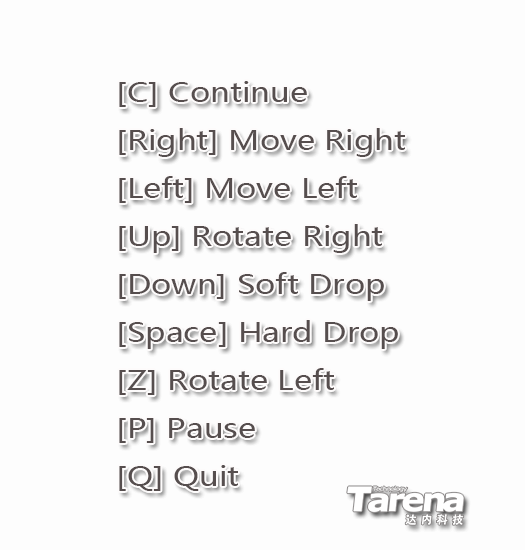
<style>
.page{position:relative;width:525px;height:550px;background:#fdfdfd}
.page>*{position:absolute;margin:0}
.t1{font:27.4px "MicrosoftYaHei";color:#564e4e;scale:1.17 1}
</style>
<div class="page">
<p class="t1" style="left:119px;top:81px;width:286px;height:410px">[C] Continue<br>[Right] Move Right<br>[Left] Move Left<br>[Up] Rotate Right<br>[Down] Soft Drop<br>[Space] Hard Drop<br>[Z] Rotate Left<br>[P] Pause<br>[Q] Quit</p>
</div>
